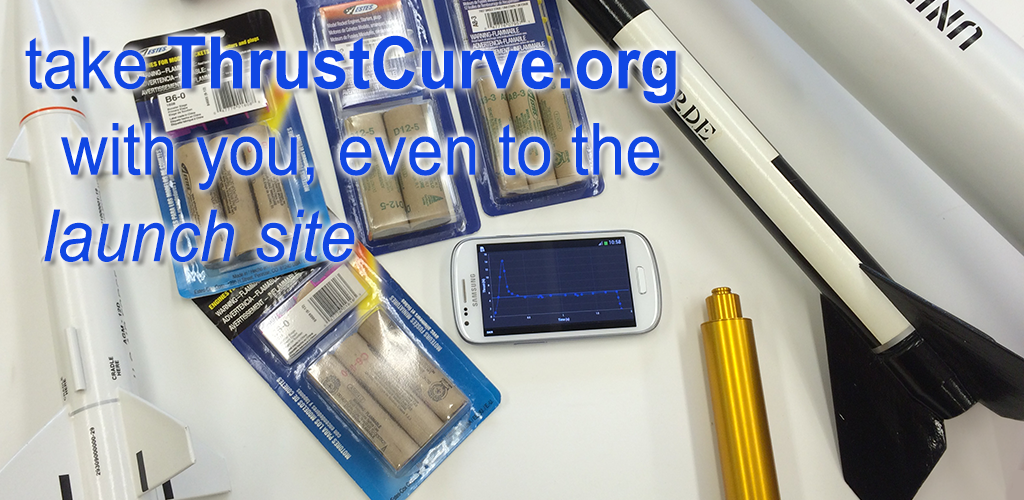
<style>
.page{position:relative;width:1024px;height:500px}
.page>*{position:absolute;margin:0}
.t1{font:72px "ArialMT";color:#1047e3;scale:0.91 1}
.t2{font:72px "Arial-BoldMT";color:#1047e3;scale:0.91 1}
.t3{font:72px "Arial-ItalicMT";color:#1047e3;scale:0.91 1}
</style>
<div class="page">
<p class="t1" style="left:25px;top:35px;width:651px;height:227px">take <span class="t2">ThrustCurve.org<br></span>  with you, even to the<br><span class="t3"> launch site</span></p>
</div>
